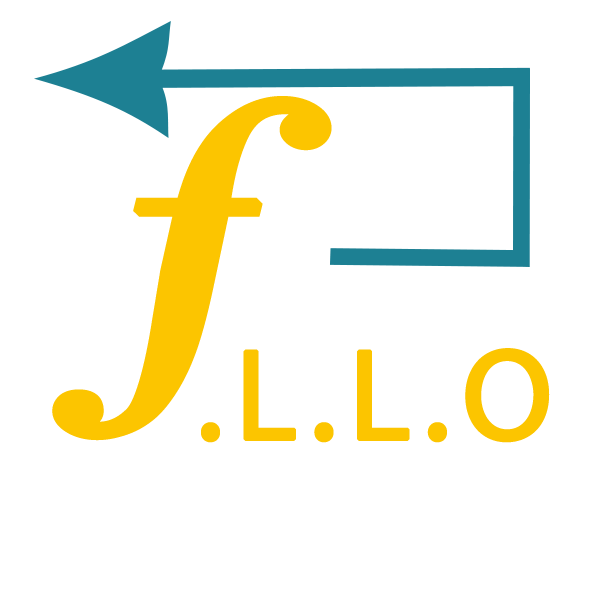
<style>
.page{position:relative;width:600px;height:600px;background:#ffffff}
.page>*{position:absolute;margin:0}
.t1{font:359.7px "BodoniMT-Italic";letter-spacing:0.07em;color:#fcc500;font-weight:bold;scale:1.26 1}
.t2{font:130px "MyriadPro-Regular";letter-spacing:0.07em;color:#fcc500;font-weight:bold}
</style>
<div class="page">
<p class="t1" style="left:52px;top:96px;width:280px;height:345px">f</p>
<p class="t2" style="left:201px;top:348px;width:349px;height:95px">.L.L.O</p>
</div>
